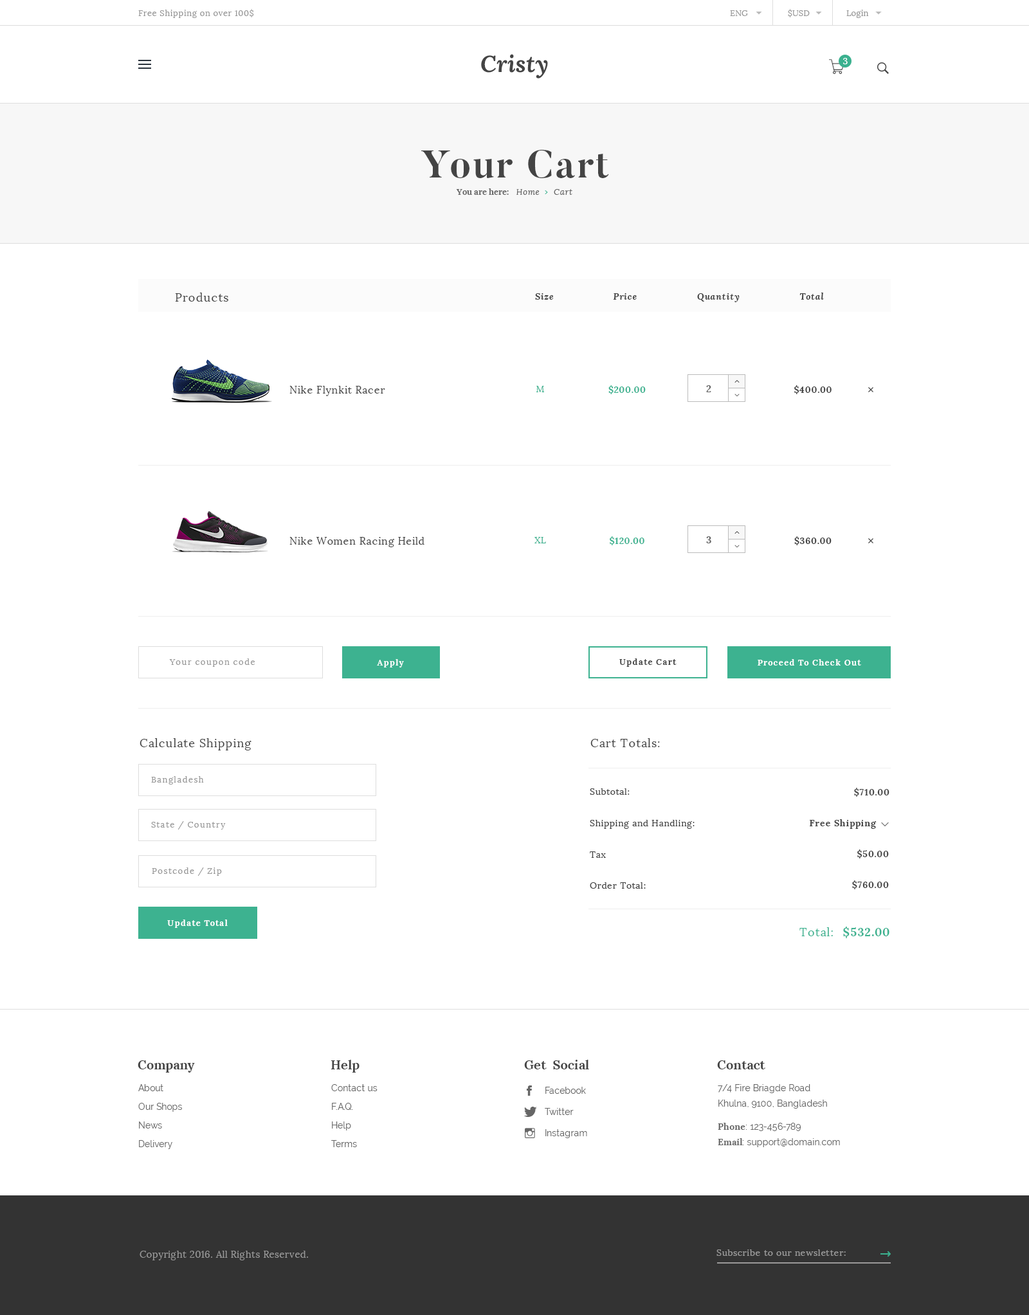
<style>
.page{position:relative;width:1029px;height:1315px;background:#ffffff}
.page>*{position:absolute;margin:0}
.t1{font:8.4px "Lora-Regular";letter-spacing:0.05em;color:#999999}
.t2{font:8.4px "Lora-Regular";letter-spacing:0.005em;color:#999999}
.t3{font:23.1px "Lora-BoldItalic";letter-spacing:0.01em;color:#444444}
.t4{font:9px "Lora-Regular";letter-spacing:0.1em;color:#ffffff}
.t5{font:38.6px "Butler-Bold";letter-spacing:0.05em;color:#444444}
.t6{font:8.4px "Lora-Italic";letter-spacing:0.05em;color:#666666}
.t7{font:8.4px "Lora-Bold";color:#666666}
.t8{font:8.4px "Lora-Bold";letter-spacing:0.05em;color:#666666}
.t9{font:11.6px "Lora-Regular";letter-spacing:0.05em;color:#444444}
.t10{font:9px "Lora-BoldItalic";letter-spacing:0.05em;color:#444444}
.t11{font:10.3px "Lora-Regular";letter-spacing:0.05em;color:#444444}
.t12{font:9px "Lora-Regular";letter-spacing:0.05em;color:#3bb18f}
.t13{font:9px "Lora-Bold";letter-spacing:0.05em;color:#3db290}
.t14{font:9.6px "Lora-Bold";letter-spacing:0.05em;color:#666666}
.t15{font:9px "Lora-Bold";letter-spacing:0.05em;color:#444444}
.t16{font:8.4px "Lora-Regular";letter-spacing:0.1em;color:#999999}
.t17{font:8.4px "Lora-Bold";letter-spacing:0.1em;color:#ffffff}
.t18{font:8.4px "Lora-Bold";letter-spacing:0.1em;color:#444444}
.t19{font:9px "Lora-Regular";letter-spacing:0.05em;color:#444444}
.t20{font:11.6px "Lora-Regular";letter-spacing:0.05em;color:#3db290}
.t21{font:11.6px "Lora-Bold";letter-spacing:0.05em;color:#3db290}
.t22{font:12.9px "Lora-Bold";letter-spacing:0.005em;color:#444444}
.t23{font:9px/18.6px "Raleway-Regular";letter-spacing:0.005em;color:#666666}
.t24{font:9px/15.4px "Raleway-Regular";letter-spacing:0.005em;color:#666666}
.t25{font:9px/11.6px "Lora-Bold";letter-spacing:0.005em;color:#666666}
.t26{font:9px/11.6px "Raleway-Regular";letter-spacing:0.005em;color:#666666}
.t27{font:9px/15.4px "Lora-Bold";letter-spacing:0.005em;color:#666666}
.t28{font:9px/21.2px "Raleway-Regular";letter-spacing:0.005em;color:#666666}
.t29{font:9.6px "Lora-Regular";letter-spacing:0.025em;color:#999999}
.t30{font:9px "Lora-Regular";letter-spacing:0.05em;color:#999999}
</style>
<div class="page">
<p class="t1" style="left:138px;top:9px;width:116px;height:9px">Free Shipping on over 100$</p>
<p class="t2" style="left:730px;top:10px;width:18px;height:6px">ENG</p>
<p class="t2" style="left:788px;top:9px;width:21px;height:8px">$USD</p>
<p class="t2" style="left:846px;top:10px;width:23px;height:8px">Login</p>
<p class="t3" style="left:481px;top:54px;width:67px;height:24px">Cristy</p>
<p class="t4" style="left:843px;top:58px;width:4px;height:6px">3</p>
<p class="t5" style="left:421px;top:150px;width:188px;height:28px">Your Cart</p>
<p class="t6" style="left:456px;top:188px;width:116px;height:7px"><span class="t7">You are here</span><span class="t8">:   </span>Home      Cart</p>
<p class="t9" style="left:175px;top:292px;width:53px;height:10px">Products</p>
<p class="t10" style="left:535px;top:293px;width:19px;height:7px">Size</p>
<p class="t10" style="left:613px;top:293px;width:23px;height:7px">Price</p>
<p class="t10" style="left:697px;top:293px;width:42px;height:9px">Quantity</p>
<p class="t10" style="left:799px;top:292px;width:25px;height:8px">Total</p>
<p class="t11" style="left:289px;top:386px;width:96px;height:10px">Nike Flynkit Racer</p>
<p class="t12" style="left:536px;top:386px;width:8px;height:6px">M</p>
<p class="t13" style="left:608px;top:385px;width:37px;height:9px">$200.00</p>
<p class="t14" style="left:706px;top:385px;width:5px;height:7px">2</p>
<p class="t15" style="left:794px;top:385px;width:37px;height:9px">$400.00</p>
<p class="t11" style="left:289px;top:537px;width:135px;height:10px">Nike Women Racing Heild</p>
<p class="t12" style="left:534px;top:537px;width:12px;height:6px">XL</p>
<p class="t13" style="left:609px;top:536px;width:35px;height:9px">$120.00</p>
<p class="t14" style="left:706px;top:536px;width:5px;height:7px">3</p>
<p class="t15" style="left:794px;top:536px;width:37px;height:9px">$360.00</p>
<p class="t16" style="left:169px;top:658px;width:86px;height:9px">Your coupon code</p>
<p class="t17" style="left:377px;top:659px;width:27px;height:8px">Apply</p>
<p class="t18" style="left:619px;top:658px;width:57px;height:9px">Update Cart</p>
<p class="t17" style="left:757px;top:659px;width:104px;height:6px">Proceed To Check Out</p>
<p class="t9" style="left:140px;top:738px;width:111px;height:12px">Calculate Shipping</p>
<p class="t9" style="left:590px;top:738px;width:70px;height:9px">Cart Totals:</p>
<p class="t16" style="left:151px;top:776px;width:53px;height:8px">Bangladesh</p>
<p class="t19" style="left:590px;top:788px;width:39px;height:7px">Subtotal:</p>
<p class="t15" style="left:854px;top:788px;width:35px;height:9px">$710.00</p>
<p class="t16" style="left:151px;top:821px;width:75px;height:8px">State / Country</p>
<p class="t19" style="left:590px;top:820px;width:104px;height:9px">Shipping and Handling:</p>
<p class="t15" style="left:809px;top:819px;width:67px;height:10px">Free Shipping</p>
<p class="t19" style="left:590px;top:851px;width:16px;height:7px">Tax</p>
<p class="t15" style="left:857px;top:849px;width:31px;height:9px">$50.00</p>
<p class="t16" style="left:152px;top:867px;width:70px;height:9px">Postcode / Zip</p>
<p class="t15" style="left:852px;top:880px;width:36px;height:9px">$760.00</p>
<p class="t19" style="left:590px;top:882px;width:55px;height:6px">Order Total:</p>
<p class="t17" style="left:167px;top:919px;width:61px;height:9px">Update Total</p>
<p class="t20" style="left:799px;top:927px;width:34px;height:9px">Total:</p>
<p class="t21" style="left:843px;top:926px;width:46px;height:12px">$532.00</p>
<p class="t22" style="left:138px;top:1060px;width:57px;height:12px">Company</p>
<p class="t22" style="left:331px;top:1059px;width:28px;height:13px">Help</p>
<p class="t22" style="left:524px;top:1059px;width:65px;height:10px">Get  Social</p>
<p class="t22" style="left:717px;top:1060px;width:48px;height:9px">Contact</p>
<p class="t23" style="left:138px;top:1084px;width:44px;height:65px">About<br>Our Shops<br>News<br>Delivery<br>Returns</p>
<p class="t23" style="left:331px;top:1084px;width:46px;height:63px">Contact us<br>F.A.Q.<br>Help<br>Terms</p>
<p class="t24" style="left:717px;top:1084px;width:123px;height:63px">7/4 Fire Briagde Road<br>Khulna, 9100, Bangladesh<br><br><span class="t25">Phone</span><span class="t26">: 123-456-789<br></span><span class="t27">Email</span>: support@domain.com</p>
<p class="t28" style="left:544px;top:1086px;width:43px;height:52px">Facebook<br>Twitter<br>Instagram</p>
<p class="t29" style="left:140px;top:1250px;width:168px;height:10px">Copyright 2016. All Rights Reserved.</p>
<p class="t30" style="left:716px;top:1249px;width:129px;height:7px">Subscribe to our newsletter:</p>
</div>
